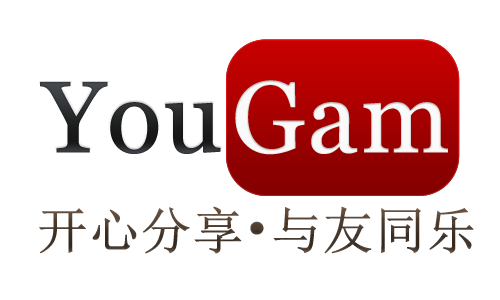
<style>
.page{position:relative;width:500px;height:300px;background:#ffffff}
.page>*{position:absolute;margin:0}
.t1{font:100.7px "Georgia";color:#272829;font-weight:bold}
.t2{font:100.7px "Georgia";color:#ffffff;font-weight:bold}
.t3{font:50.3px "SimSun";color:#4c3c30;font-weight:bold}
</style>
<div class="page">
<p class="t1" style="left:40px;top:82px;width:181px;height:72px">You</p>
<p class="t2" style="left:235px;top:80px;width:213px;height:75px">Gam</p>
<p class="t3" style="left:39px;top:206px;width:435px;height:48px">开心分享•与友同乐</p>
</div>
